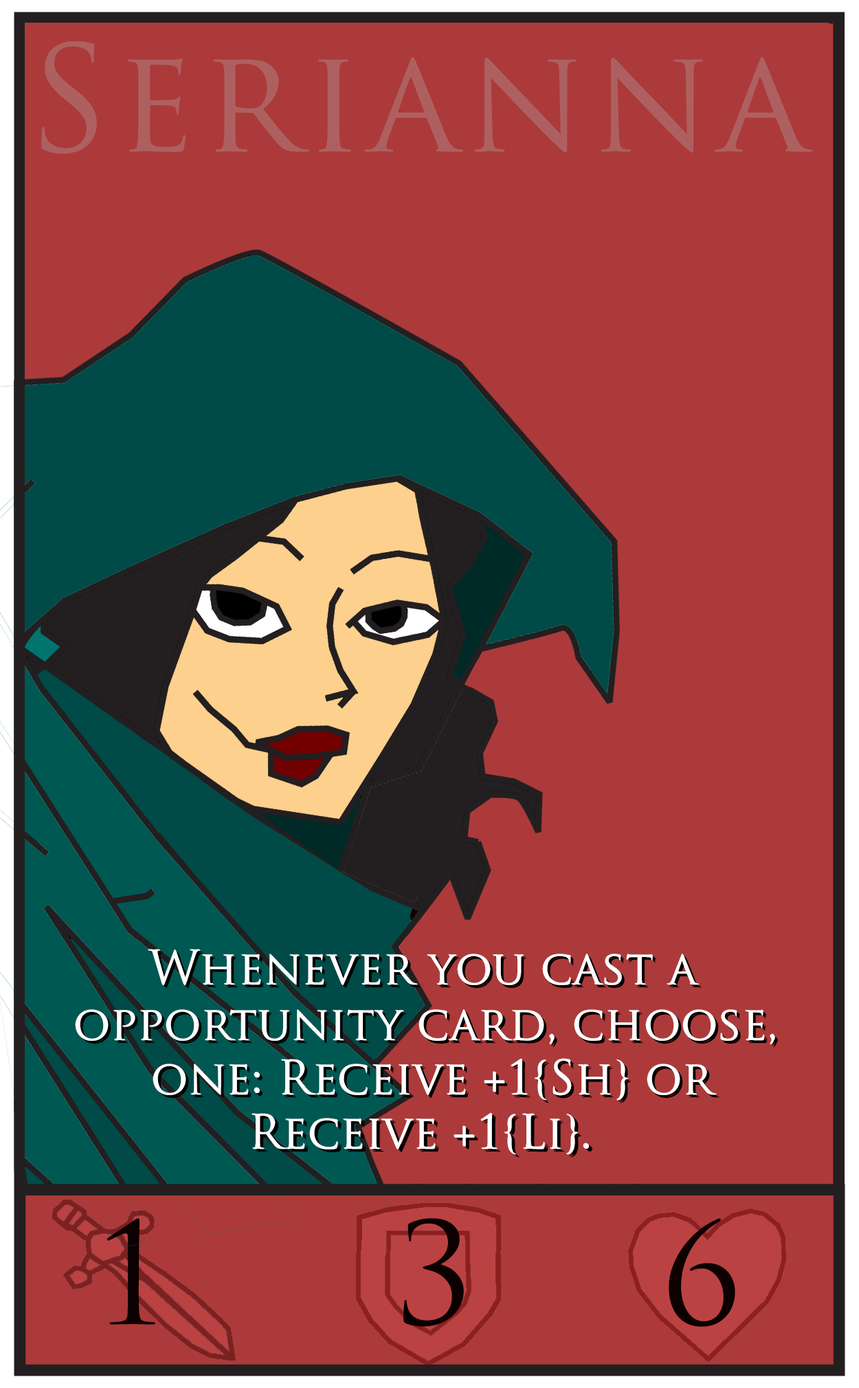
<style>
.page{position:relative;width:859px;height:1388px;background:#ac3a3a}
.page>*{position:absolute;margin:0}
.t1{font:45.8px "TrajanPro-Regular";color:#ffffff}
.t2{font:51.6px "TrajanPro-Regular";color:#0c535b}
</style>
<div class="page">
<p class="t1" style="left:148px;top:949px;width:551px;height:36px">Whenever you cast a</p>
<p class="t1" style="left:148px;top:949px;width:552px;height:37px">Whenever you cast a</p>
<p class="t1" style="left:75px;top:1009px;width:700px;height:35px">opportunity card, choose,</p>
<p class="t1" style="left:76px;top:1010px;width:699px;height:35px">opportunity card, choose,</p>
<p class="t1" style="left:153px;top:1058px;width:563px;height:42px">one: Receive +1{Sh} or</p>
<p class="t1" style="left:153px;top:1059px;width:564px;height:41px">one: Receive +1{Sh} or</p>
<p class="t1" style="left:252px;top:1112px;width:336px;height:42px"><span class="t2"> </span>Receive +1{Li}.</p>
<p class="t1" style="left:252px;top:1113px;width:337px;height:42px"><span class="t2"> </span>Receive +1{Li}.</p>
</div>
